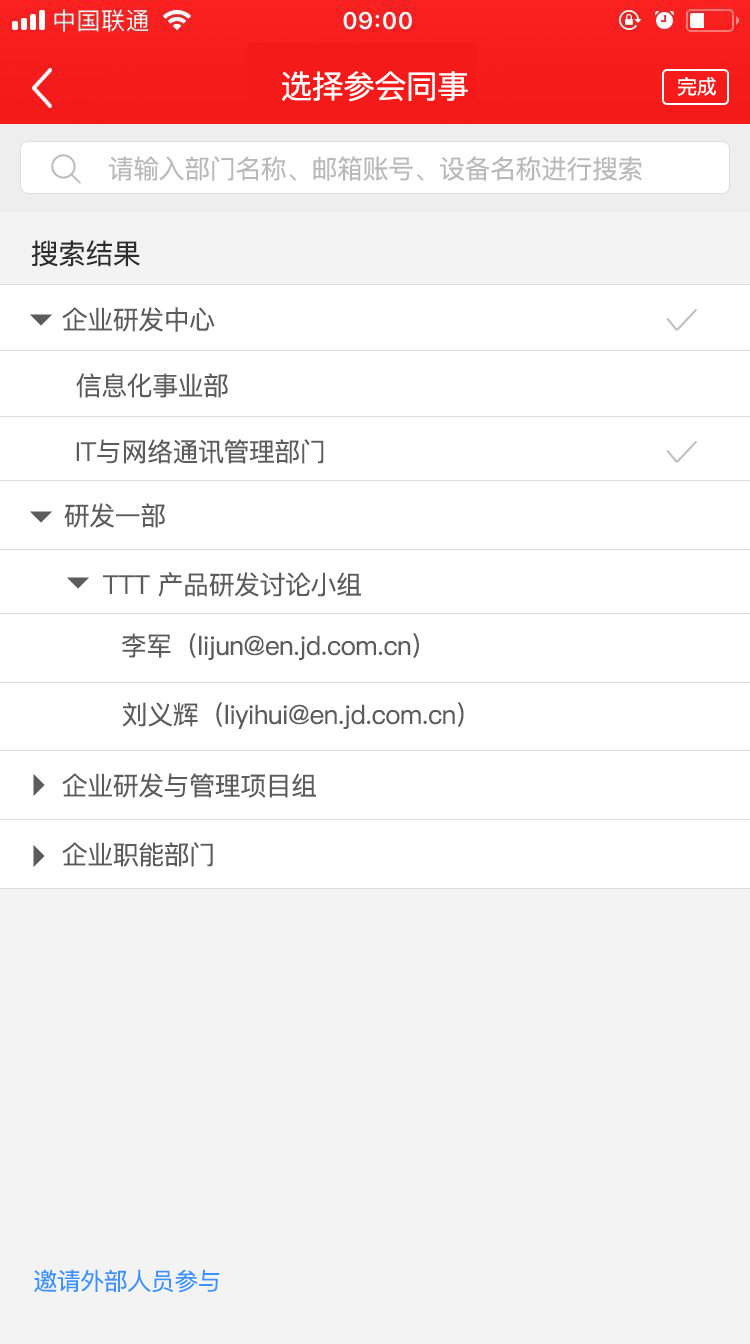
<style>
.page{position:relative;width:750px;height:1344px;background:#ffffff}
.page>*{position:absolute;margin:0}
.t1{font:32px "PingFangSC-Regular";letter-spacing:-0.02em;color:#ffffff}
.t2{font:20px "PingFangSC-Regular";letter-spacing:-0.02em;color:#ffffff}
.t3{font:26px "PingFangSC-Regular";letter-spacing:-0.02em;color:#b9b9b9}
.t4{font:28px "PingFangSC-Regular";letter-spacing:-0.02em;color:#2d2d2d}
.t5{font:26px "PingFangSC-Regular";letter-spacing:-0.02em;color:#5c5c5c}
.t6{font:24px "PingFangSC-Regular";letter-spacing:-0.02em;color:#3b93ff}
</style>
<div class="page">
<p class="t1" style="left:282px;top:71px;width:186px;height:31px">选择参会同事</p>
<p class="t2" style="left:677px;top:77px;width:39px;height:19px">完成</p>
<p class="t3" style="left:108px;top:156px;width:534px;height:25px">请输入部门名称、邮箱账号、设备名称进行搜索</p>
<p class="t4" style="left:31px;top:240px;width:109px;height:27px">搜索结果</p>
<p class="t5" style="left:62px;top:307px;width:153px;height:25px">企业研发中心</p>
<p class="t5" style="left:76px;top:373px;width:152px;height:25px">信息化事业部</p>
<p class="t5" style="left:76px;top:439px;width:248px;height:25px">IT与网络通讯管理部门</p>
<p class="t5" style="left:64px;top:503px;width:101px;height:25px">研发一部</p>
<p class="t5" style="left:103px;top:572px;width:258px;height:25px">TTT 产品研发讨论小组</p>
<p class="t5" style="left:122px;top:633px;width:297px;height:27px">李军（lijun@en.jd.com.cn）</p>
<p class="t5" style="left:122px;top:702px;width:342px;height:27px">刘义辉（liyihui@en.jd.com.cn）</p>
<p class="t5" style="left:62px;top:773px;width:254px;height:25px">企业研发与管理项目组</p>
<p class="t5" style="left:62px;top:842px;width:151px;height:25px">企业职能部门</p>
<p class="t6" style="left:34px;top:1269px;width:186px;height:24px">邀请外部人员参与</p>
</div>
